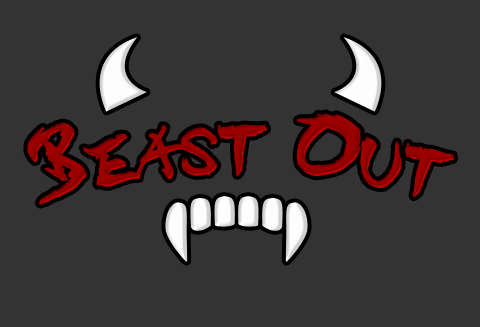
<style>
.page{position:relative;width:480px;height:327px;background:#333333}
.page>*{position:absolute;margin:0}
.t1{font:100px "DISTInkingBold";color:#990000;font-variant:small-caps}
</style>
<div class="page">
<p class="t1" style="left:27px;top:113px;width:428px;height:92px">Beast Out</p>
</div>
